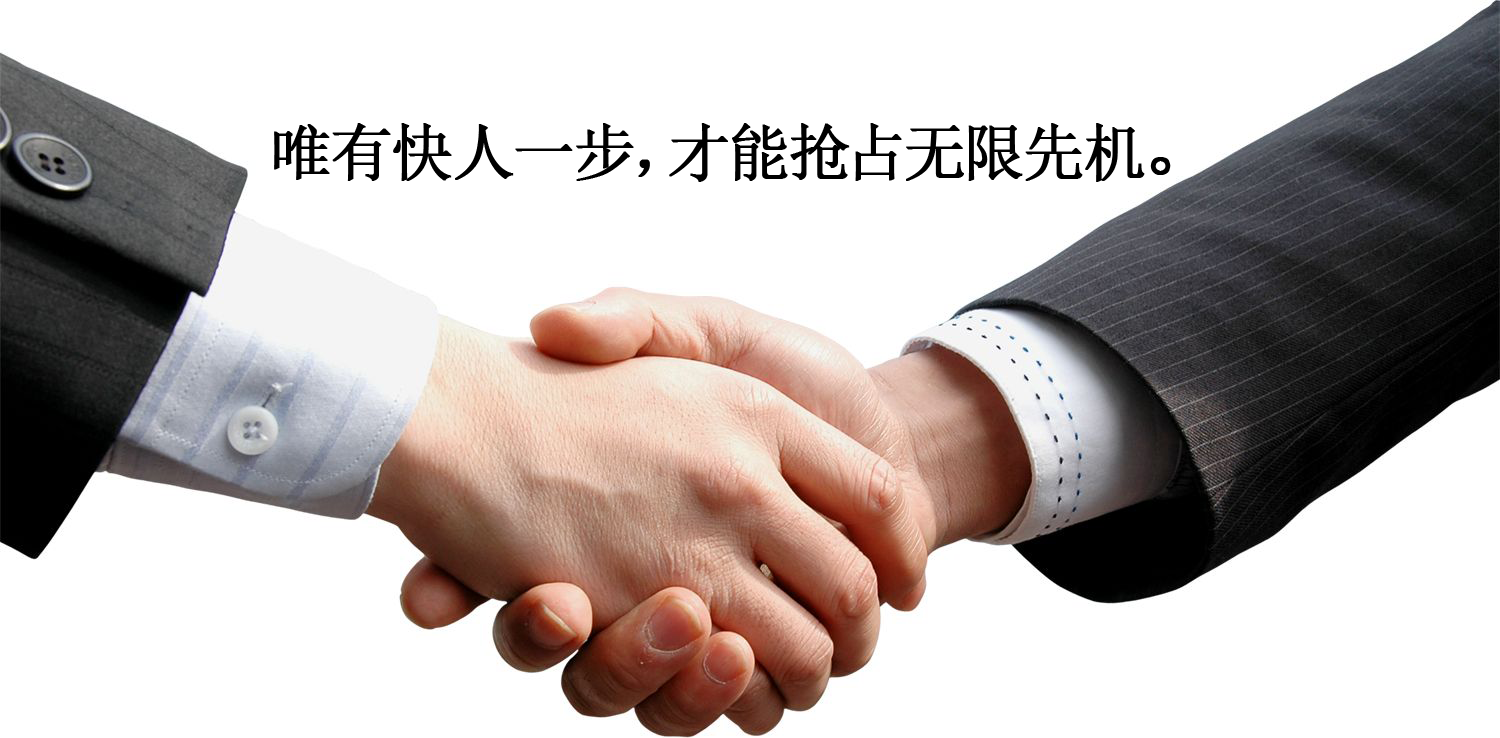
<style>
.page{position:relative;width:1500px;height:738px;background:#ffffff}
.page>*{position:absolute;margin:0}
.t1{font:62.3px "SimSun";color:#000000;font-weight:bold}
.t2{font:78.7px "SimSun";color:#000000;font-weight:bold}
</style>
<div class="page">
<p class="t1" style="left:274px;top:123px;width:897px;height:59px">唯有快人一步，才能抢占无限先机<span class="t2">。</span></p>
</div>
